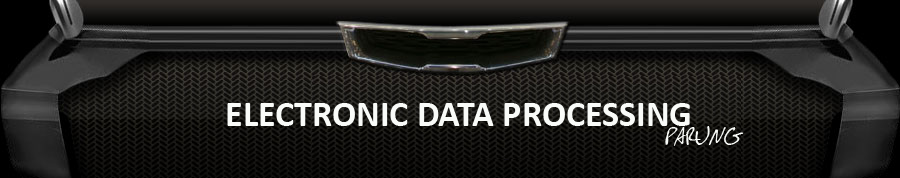
<style>
.page{position:relative;width:900px;height:178px}
.page>*{position:absolute;margin:0}
.t1{font:36px "Calibri-Bold";color:#f9fbf8}
.t2{font:24px "Festus";color:#f9fbf8}
</style>
<div class="page">
<p class="t1" style="left:227px;top:103px;width:463px;height:23px">ELECTRONIC DATA PROCESSING</p>
<p class="t2" style="left:665px;top:126px;width:78px;height:20px">PARUNG</p>
</div>
